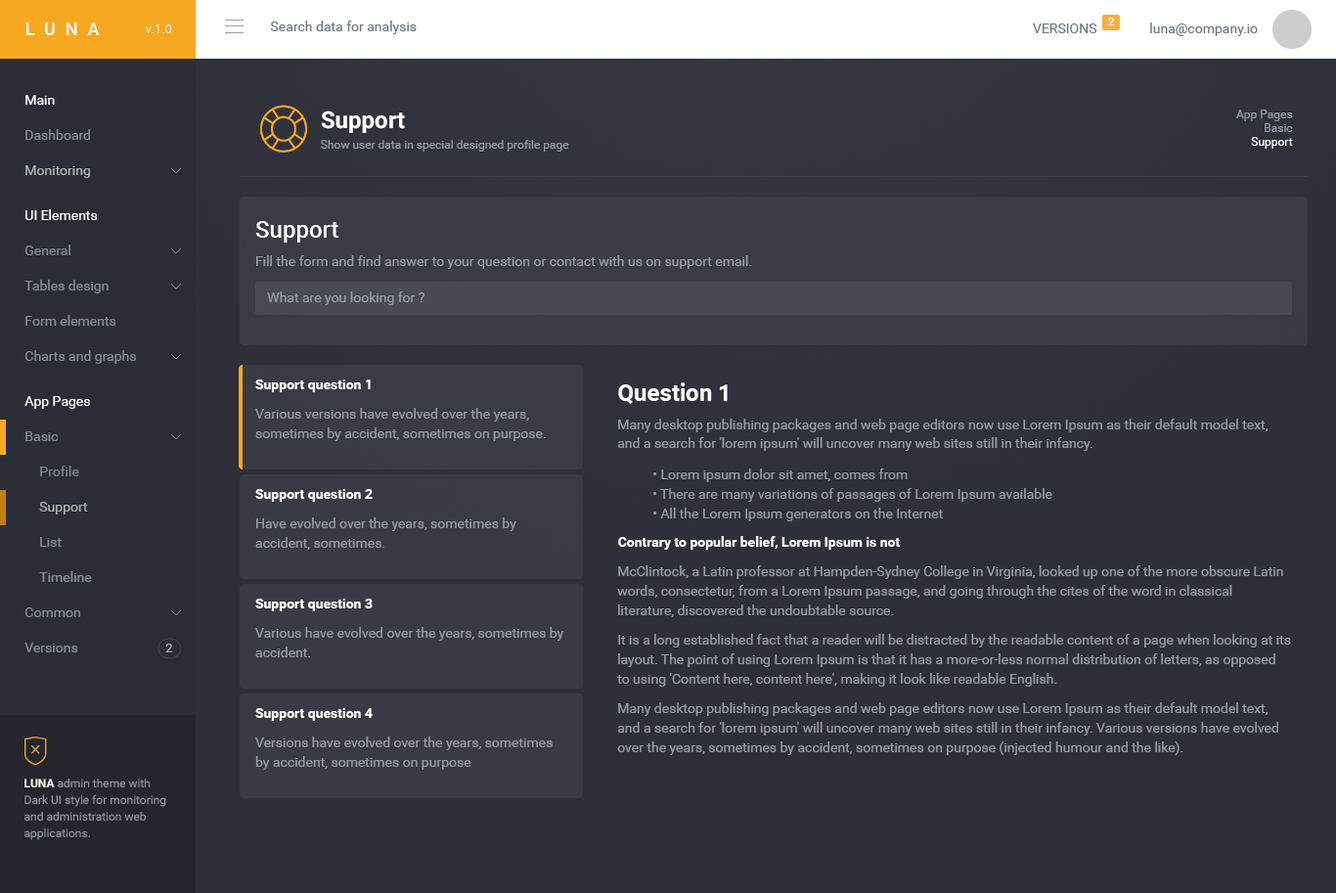
<style>
.page{position:relative;width:1336px;height:893px;background:#2d3038}
.page>*{position:absolute;margin:0}
.t1{font:10.8px "Roboto-Bold";color:#ffffff}
.t2{font:17.6px "Roboto-Medium";letter-spacing:0.55em;color:#ffffff}
.t3{font:12.7px "Roboto-Regular";color:#fbdfbc}
.t4{font:13.7px "Roboto-Regular";color:#6f7780}
.t5{font:13.7px "Roboto-Regular";color:#ffffff}
.t6{font:23.5px "Roboto-Bold";color:#ffffff}
.t7{font:11.7px/13.7px "Roboto-Regular";color:#949ba2}
.t8{font:11.7px/13.7px "Roboto-Regular";color:#ffffff}
.t9{font:13.7px "Roboto-Regular";color:#848c94}
.t10{font:11.7px "Roboto-Regular";color:#949ba2}
.t11{font:13.7px "Roboto-Regular";color:#a9b2b0}
.t12{font:23.5px "Roboto-Medium";color:#ffffff}
.t13{font:13.7px "Roboto-Regular";color:#949ba2}
.t14{font:13.7px "Roboto-Bold";color:#ffffff}
.t15{font:13.7px/19.6px "Roboto-Regular";color:#949ba2}
.t16{font:13.7px/18.6px "Roboto-Regular";color:#949ba2}
.t17{font:13.7px/11.7px "Roboto-Regular";color:#949ba2}
.t18{font:13.7px "Roboto-Regular";color:#7a828a}
.t19{font:12.7px "Roboto-Regular";color:#aaacb5}
.t20{font:11.7px/16.6px "Roboto-Regular";color:#949ba2}
.t21{font:11.7px/16.6px "Roboto-Bold";color:#ffffff}
</style>
<div class="page">
<p class="t1" style="left:1108px;top:18px;width:6px;height:7px">2</p>
<p class="t2" style="left:25px;top:22px;width:75px;height:13px">LUNA</p>
<p class="t3" style="left:145px;top:24px;width:27px;height:9px">v.1.0</p>
<p class="t4" style="left:270px;top:21px;width:147px;height:13px">Search data for analysis</p>
<p class="t4" style="left:1033px;top:23px;width:64px;height:10px">VERSIONS</p>
<p class="t4" style="left:1150px;top:22px;width:107px;height:14px">luna@company.io</p>
<p class="t5" style="left:25px;top:95px;width:30px;height:10px">Main</p>
<p class="t6" style="left:321px;top:110px;width:84px;height:23px">Support</p>
<p class="t7" style="left:1236px;top:110px;width:57px;height:39px;text-align:right">App Pages<br>Basic<br><span class="t8">Support</span></p>
<p class="t9" style="left:25px;top:129px;width:65px;height:11px">Dashboard</p>
<p class="t10" style="left:321px;top:140px;width:248px;height:12px">Show user data in special designed profile page</p>
<p class="t11" style="left:25px;top:165px;width:65px;height:13px">Monitoring</p>
<p class="t5" style="left:25px;top:209px;width:73px;height:11px">UI Elements</p>
<p class="t12" style="left:255px;top:221px;width:83px;height:21px">Support</p>
<p class="t9" style="left:25px;top:244px;width:45px;height:11px">General</p>
<p class="t13" style="left:256px;top:255px;width:496px;height:14px">Fill the form and find answer to your question or contact with us on support email.</p>
<p class="t9" style="left:24px;top:280px;width:85px;height:13px">Tables design</p>
<p class="t13" style="left:267px;top:291px;width:157px;height:14px">What are you looking for ?</p>
<p class="t9" style="left:25px;top:315px;width:91px;height:11px">Form elements</p>
<p class="t9" style="left:24px;top:350px;width:112px;height:14px">Charts and graphs</p>
<p class="t14" style="left:255px;top:379px;width:116px;height:13px">Support question 1</p>
<p class="t6" style="left:618px;top:382px;width:109px;height:22px">Question 1</p>
<p class="t5" style="left:24px;top:396px;width:66px;height:13px">App Pages</p>
<p class="t15" style="left:255px;top:408px;width:291px;height:33px">Various versions have evolved over the years, sometimes by accident, sometimes on purpose.</p>
<p class="t16" style="left:617px;top:419px;width:650px;height:102px">Many desktop publishing packages and web page editors now use Lorem Ipsum as their default model text, and a search for 'lorem ipsum' will uncover many web sites still in their infancy.<span class="t17"><br><br> • </span>Lorem ipsum dolor sit amet<span class="t15">, comes from<br> • There are many variations of passages of Lorem Ipsum available<br> • All the Lorem Ipsum generators on the Internet</span></p>
<p class="t9" style="left:25px;top:431px;width:34px;height:10px">Basic</p>
<p class="t18" style="left:40px;top:465px;width:39px;height:11px">Profile</p>
<p class="t14" style="left:255px;top:489px;width:118px;height:13px">Support question 2</p>
<p class="t11" style="left:39px;top:502px;width:49px;height:12px">Support</p>
<p class="t15" style="left:255px;top:517px;width:261px;height:33px">Have evolved over the years, sometimes by accident, sometimes.</p>
<p class="t9" style="left:40px;top:537px;width:22px;height:10px">List</p>
<p class="t14" style="left:618px;top:536px;width:283px;height:14px">Contrary to popular belief, Lorem Ipsum is not</p>
<p class="t15" style="left:617px;top:565px;width:674px;height:190px">McClintock, a Latin professor at Hampden-Sydney College in Virginia, looked up one of the more obscure Latin words, consectetur, from a Lorem Ipsum passage, and going through the cites of the word in classical <br>literature, discovered the undoubtable source.<br><br>It is a long established fact that a reader will be distracted by the readable content of a page when looking at its layout. The point of using Lorem Ipsum is that it has a more-or-less normal distribution of letters, as opposed <br>to using 'Content here, content here', making it look like readable English.<br><br>Many desktop publishing packages and web page editors now use Lorem Ipsum as their default model text, and a search for 'lorem ipsum' will uncover many web sites still in their infancy. Various versions have evolved over the years, sometimes by accident, sometimes on purpose (injected humour and the like).</p>
<p class="t9" style="left:39px;top:571px;width:53px;height:11px">Timeline</p>
<p class="t14" style="left:255px;top:598px;width:118px;height:13px">Support question 3</p>
<p class="t9" style="left:24px;top:607px;width:56px;height:10px">Common</p>
<p class="t15" style="left:255px;top:627px;width:309px;height:30px">Various have evolved over the years, sometimes by accident.</p>
<p class="t9" style="left:24px;top:642px;width:54px;height:10px">Versions</p>
<p class="t19" style="left:165px;top:643px;width:8px;height:9px">2</p>
<p class="t14" style="left:255px;top:708px;width:118px;height:13px">Support question 4</p>
<p class="t15" style="left:255px;top:736px;width:297px;height:34px">Versions have evolved over the years, sometimes by accident, sometimes on purpose</p>
<p class="t20" style="left:24px;top:778px;width:142px;height:62px"><span class="t21">LUNA </span>admin theme with Dark UI style for monitoring and administration web applications.</p>
</div>
